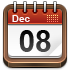
<style>
.page{position:relative;width:70px;height:70px}
.page>*{position:absolute;margin:0}
.t1{font:10px "Arial-BoldMT";color:#fdf8f8}
.t2{font:30px "Arial-BoldMT"}
</style>
<div class="page">
<p class="t1" style="left:12px;top:15px;width:18px;height:7px">Dec</p>
<p class="t2" style="left:19px;top:30px;width:32px;height:22px">08</p>
</div>
